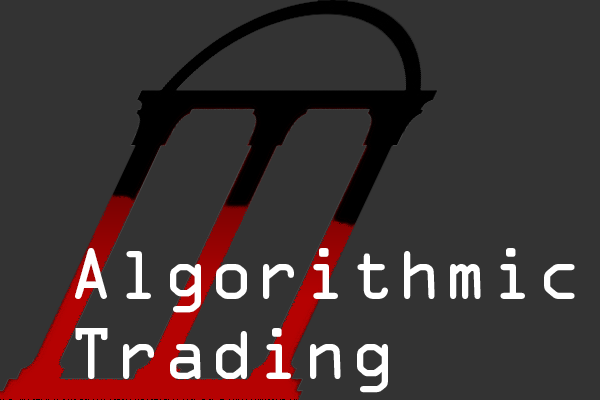
<style>
.page{position:relative;width:600px;height:400px;background:#333333}
.page>*{position:absolute;margin:0}
.t1{font:65px/20px "OCRAStd";color:#fefefe}
</style>
<div class="page">
<p class="t1" style="left:75px;top:248px;width:500px;height:145px">Algorithmic<br><br><br><br>Trading</p>
</div>
